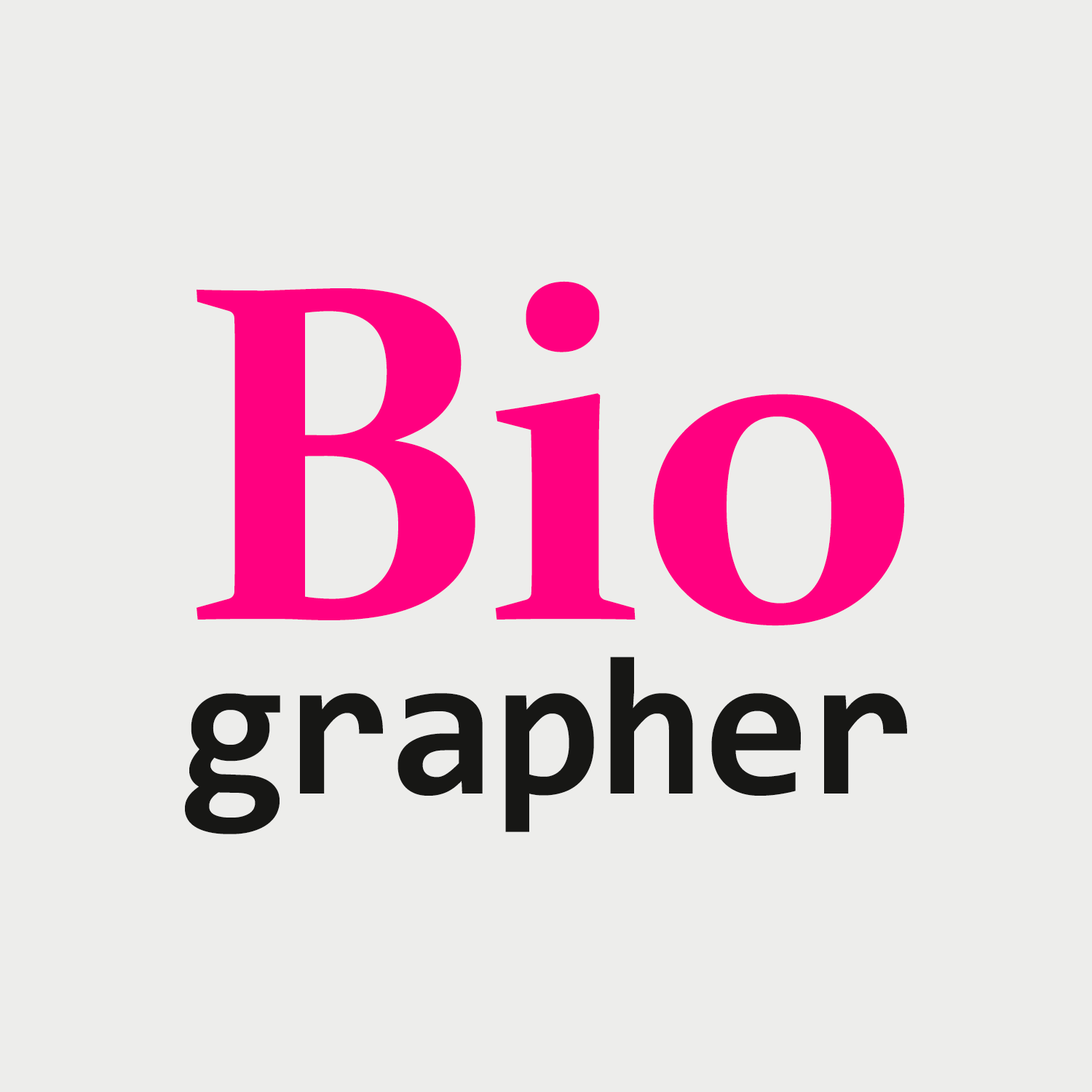
<style>
.page{position:relative;width:1092px;height:1092px;background:#ededeb}
.page>*{position:absolute;margin:0}
.t1{font:481.4px "Constantia-Bold";letter-spacing:-0.02em;color:#ff0080}
.t2{font:197.8px "Consolas-Bold";letter-spacing:-0.02em;color:#171715}
</style>
<div class="page">
<p class="t1" style="left:197px;top:281px;width:708px;height:345px">Bio</p>
<p class="t2" style="left:185px;top:657px;width:722px;height:177px">grapher</p>
</div>
